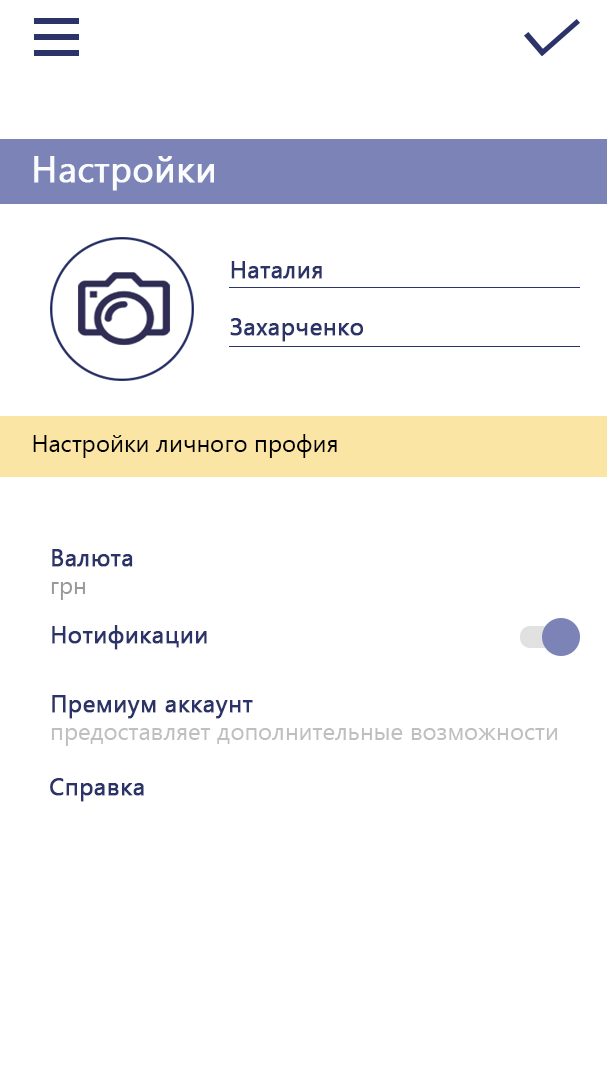
<style>
.page{position:relative;width:607px;height:1080px;background:#ffffff}
.page>*{position:absolute;margin:0}
.t1{font:36px "YuGothicUI-Regular";color:#fbfcff;font-weight:bold}
.t2{font:24px "YuGothicUI-Regular";color:#2b3368;font-weight:bold}
.t3{font:24px "YuGothicUI-Regular";color:#000000}
.t4{font:24px "YuGothicUI-Regular";color:#999999}
.t5{font:24px "YuGothicUI-Regular";color:#bebfc0}
</style>
<div class="page">
<p class="t1" style="left:34px;top:156px;width:180px;height:35px">Настройки</p>
<p class="t2" style="left:230px;top:261px;width:133px;height:81px">Наталия<br><br>Захарченко</p>
<p class="t3" style="left:33px;top:434px;width:304px;height:24px">Настройки личного профия</p>
<p class="t2" style="left:51px;top:549px;width:82px;height:51px">Валюта<br><span class="t4">грн</span></p>
<p class="t2" style="left:52px;top:625px;width:155px;height:25px">Нотификации</p>
<p class="t5" style="left:51px;top:695px;width:507px;height:51px"><span class="t2">Премиум аккаунт<br></span>предоставляет дополнительные возможности</p>
<p class="t2" style="left:50px;top:778px;width:94px;height:24px">Справка</p>
</div>
